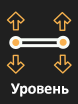
<style>
.page{position:relative;width:78px;height:104px;background:#202020}
.page>*{position:absolute;margin:0}
.t1{font:12px "Calibri-Bold";color:#ffffff}
</style>
<div class="page">
<p class="t1" style="left:11px;top:83px;width:58px;height:14px">Уровень</p>
</div>
